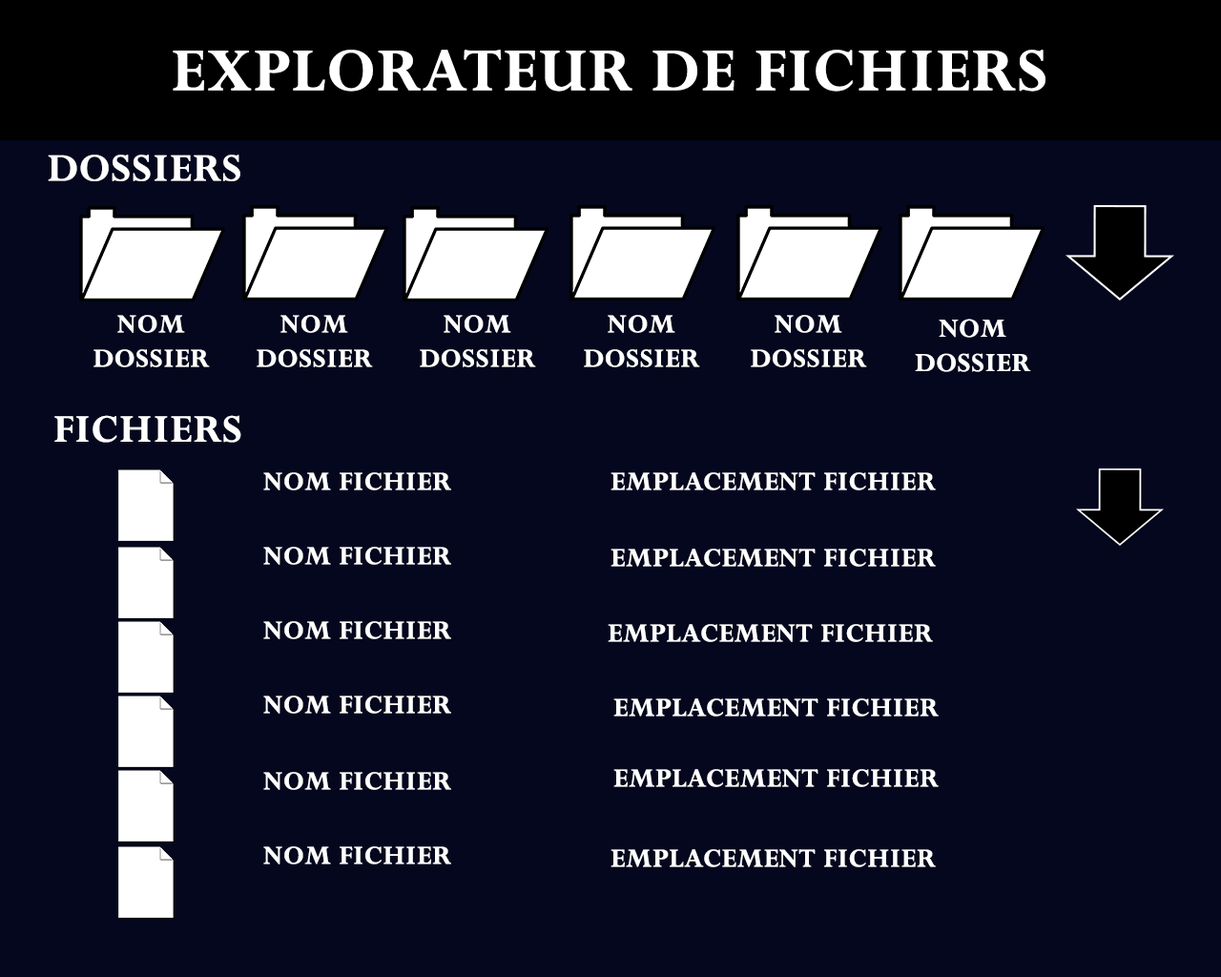
<style>
.page{position:relative;width:1221px;height:977px;background:#04071e}
.page>*{position:absolute;margin:0}
.t1{font:66.8px "Perpetua-Bold";color:#ffffff;text-transform:uppercase;font-weight:bold}
.t2{font:42.9px "Perpetua-Bold";color:#ffffff;text-transform:uppercase;font-weight:bold}
.t3{font:28.6px/34.3px "Perpetua-Bold";color:#ffffff;text-transform:uppercase;font-weight:bold}
.t4{font:28.7px/34.4px "Perpetua-Bold";color:#ffffff;text-transform:uppercase;font-weight:bold}
.t5{font:28.6px "Perpetua-Bold";color:#ffffff;text-transform:uppercase;font-weight:bold}
</style>
<div class="page">
<p class="t1" style="left:173px;top:50px;width:872px;height:42px">explorateur de fichiers</p>
<p class="t2" style="left:48px;top:155px;width:192px;height:26px">dossiers</p>
<p class="t3" style="left:93px;top:315px;width:117px;height:52px;text-align:center">nom dossier</p>
<p class="t3" style="left:257px;top:315px;width:116px;height:52px;text-align:center">nom dossier</p>
<p class="t3" style="left:420px;top:315px;width:116px;height:52px;text-align:center">nom dossier</p>
<p class="t3" style="left:584px;top:315px;width:116px;height:52px;text-align:center">nom dossier</p>
<p class="t3" style="left:751px;top:315px;width:116px;height:52px;text-align:center">nom dossier</p>
<p class="t4" style="left:915px;top:319px;width:116px;height:53px;text-align:center">nom dossier</p>
<p class="t2" style="left:54px;top:415px;width:187px;height:28px">fichiers</p>
<p class="t5" style="left:263px;top:472px;width:188px;height:18px">nom fichier</p>
<p class="t5" style="left:610px;top:472px;width:326px;height:18px">emplacement fichier</p>
<p class="t5" style="left:263px;top:547px;width:188px;height:18px">nom fichier</p>
<p class="t5" style="left:610px;top:548px;width:326px;height:19px">emplacement fichier</p>
<p class="t5" style="left:263px;top:621px;width:188px;height:18px">nom fichier</p>
<p class="t5" style="left:608px;top:624px;width:325px;height:18px">emplacement fichier</p>
<p class="t5" style="left:263px;top:695px;width:188px;height:18px">nom fichier</p>
<p class="t5" style="left:613px;top:698px;width:326px;height:18px">emplacement fichier</p>
<p class="t5" style="left:263px;top:772px;width:188px;height:18px">nom fichier</p>
<p class="t5" style="left:613px;top:769px;width:326px;height:18px">emplacement fichier</p>
<p class="t5" style="left:263px;top:846px;width:188px;height:18px">nom fichier</p>
<p class="t5" style="left:610px;top:849px;width:326px;height:18px">emplacement fichier</p>
</div>
